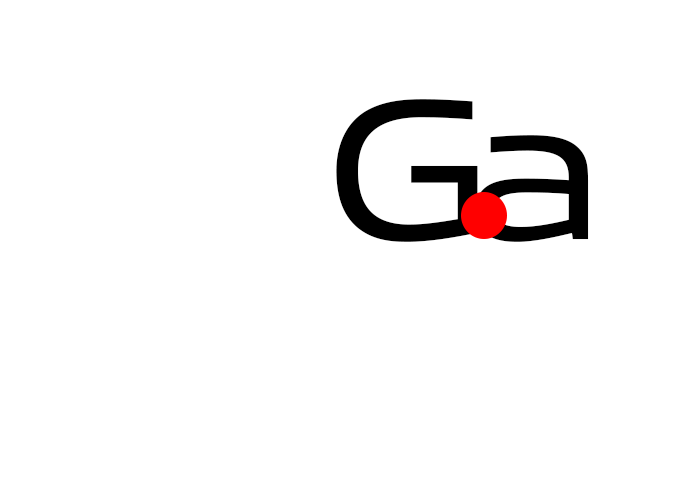
<style>
.page{position:relative;width:700px;height:480px;background:#ffffff}
.page>*{position:absolute;margin:0}
.t1{font:200px "AllumiStdExtended-Regular";color:#000000}
</style>
<div class="page">
<p class="t1" style="left:336px;top:99px;width:142px;height:143px">G</p>
<p class="t1" style="left:475px;top:135px;width:114px;height:107px">a</p>
</div>
